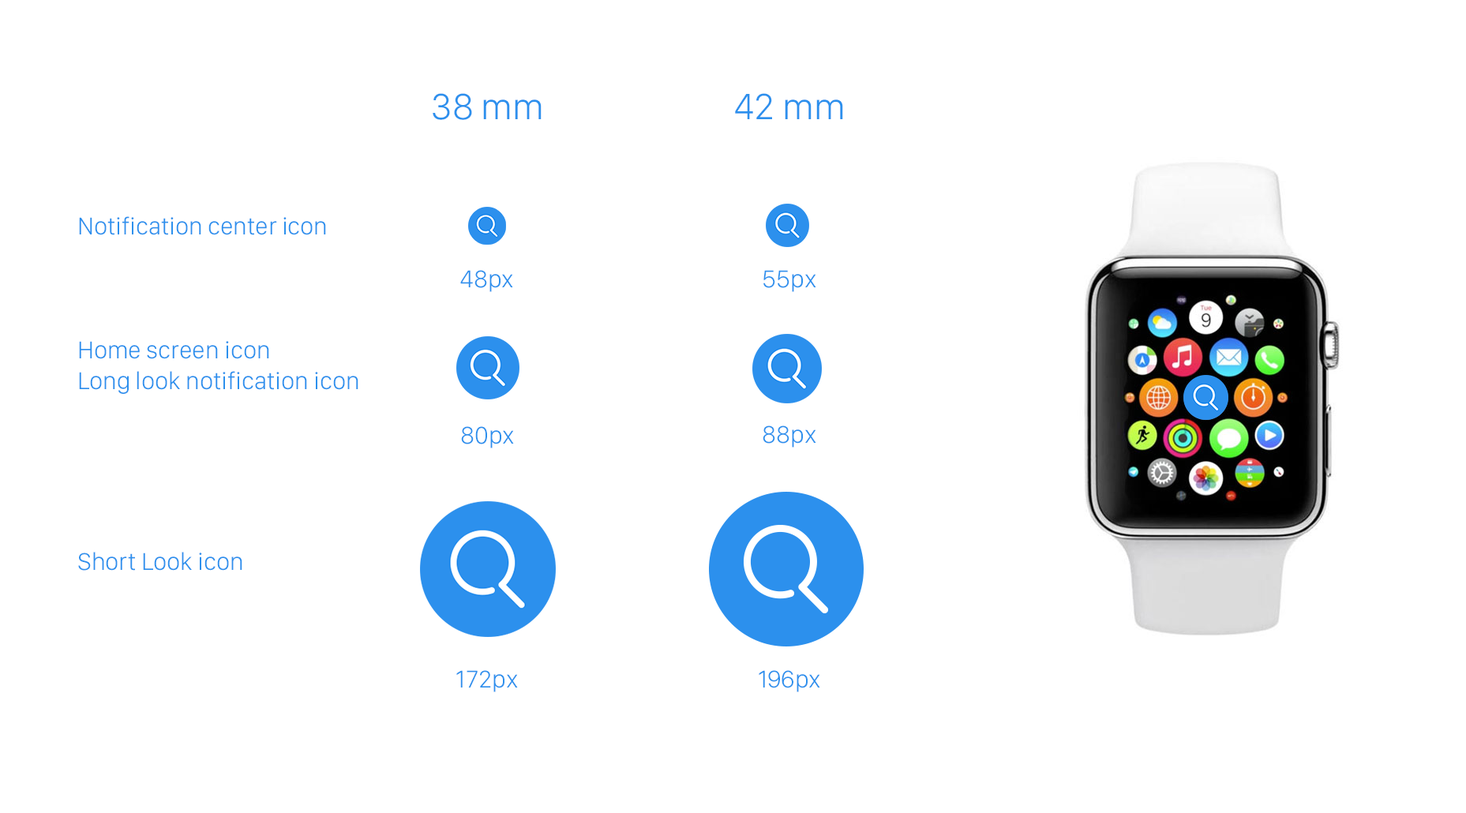
<style>
.page{position:relative;width:1466px;height:813px;background:#ffffff}
.page>*{position:absolute;margin:0}
.t1{font:37.9px "SanFranciscoDisplay-Light";color:#2c90ed}
.t2{font:25.3px "SanFranciscoDisplay-Light";color:#2c90ed}
</style>
<div class="page">
<p class="t1" style="left:433px;top:93px;width:109px;height:27px">38 mm</p>
<p class="t1" style="left:735px;top:93px;width:108px;height:26px">42 mm</p>
<p class="t2" style="left:79px;top:216px;width:247px;height:19px">Notification center icon</p>
<p class="t2" style="left:460px;top:270px;width:53px;height:22px">48px</p>
<p class="t2" style="left:764px;top:270px;width:52px;height:22px">55px</p>
<p class="t2" style="left:79px;top:341px;width:279px;height:53px">Home screen icon<br>Long look notification icon</p>
<p class="t2" style="left:763px;top:426px;width:53px;height:22px">88px</p>
<p class="t2" style="left:461px;top:426px;width:53px;height:22px">80px</p>
<p class="t2" style="left:78px;top:552px;width:164px;height:19px">Short Look icon</p>
<p class="t2" style="left:456px;top:670px;width:62px;height:22px">172px</p>
<p class="t2" style="left:759px;top:670px;width:61px;height:22px">196px</p>
</div>
